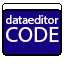
<style>
.page{position:relative;width:64px;height:64px;background:#180082}
.page>*{position:absolute;margin:0}
.t1{font:12.2px "MyriadPro-Regular";color:#ffffff}
.t2{font:22.4px "MyriadPro-Regular";color:#ffffff}
</style>
<div class="page">
<p class="t1" style="left:6px;top:15px;width:53px;height:9px">dataeditor</p>
<p class="t2" style="left:6px;top:27px;width:53px;height:15px">CODE</p>
</div>
